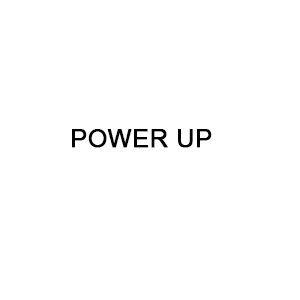
<style>
.page{position:relative;width:300px;height:300px;background:#ffffff}
.page>*{position:absolute;margin:0}
.t1{font:25.4px "ArialMT";color:#000000;font-weight:bold}
</style>
<div class="page">
<p class="t1" style="left:72px;top:129px;width:140px;height:19px">POWER UP</p>
</div>
